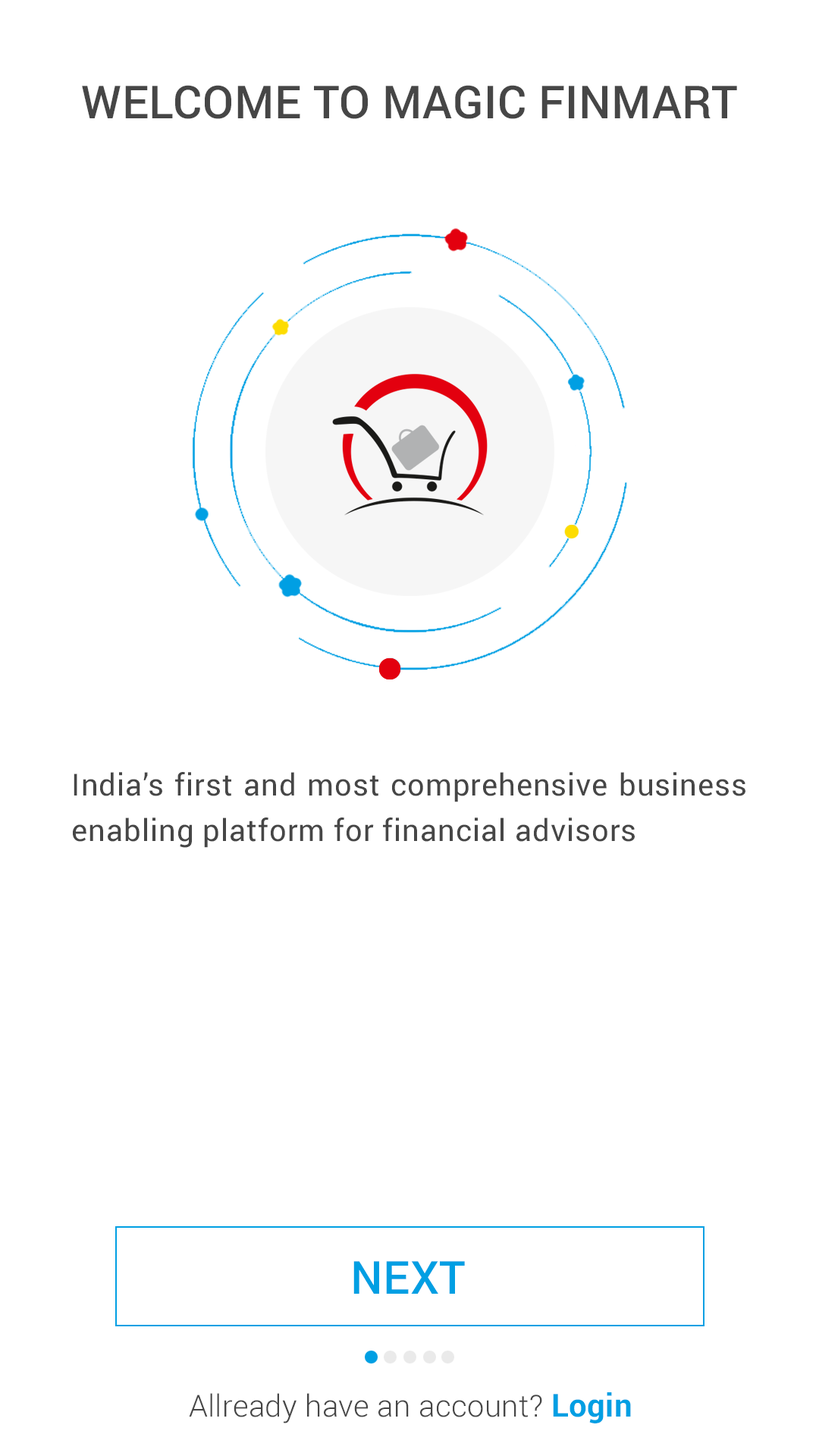
<style>
.page{position:relative;width:819px;height:1456px;background:#ffffff}
.page>*{position:absolute;margin:0}
.t1{font:45.5px "Roboto-Medium";letter-spacing:0.01em;color:#464646;text-transform:uppercase}
.t2{font:30.3px/45.5px "Roboto-Regular";letter-spacing:0.025em;color:#464646}
.t3{font:45.5px "Roboto-Medium";letter-spacing:0.01em;color:#009fe3;text-transform:uppercase}
.t4{font:30.3px "Roboto-Light";letter-spacing:0.01em;color:#464646}
.t5{font:31.8px "Roboto-Bold";letter-spacing:0.01em;color:#009fe3}
</style>
<div class="page">
<p class="t1" style="left:82px;top:85px;width:655px;height:34px">Welcome to Magic Finmart</p>
<p class="t2" style="left:73px;top:772px;width:672px;height:76px;text-align:justify">India’s first and most comprehensive business enabling platform for financial advisors</p>
<p class="t3" style="left:353px;top:1261px;width:112px;height:33px">NEXT</p>
<p class="t4" style="left:189px;top:1392px;width:442px;height:31px">Allready have an account? <span class="t5">Login</span></p>
</div>
